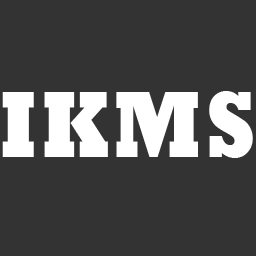
<style>
.page{position:relative;width:256px;height:256px;background:#333333}
.page>*{position:absolute;margin:0}
.t1{font:96px "Rockwell-ExtraBold";letter-spacing:0.05em;color:#ffffff;scale:0.83 1}
</style>
<div class="page">
<p class="t1" style="left:2px;top:91px;width:251px;height:67px">IKMS</p>
</div>
